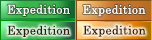
<style>
.page{position:relative;width:152px;height:40px}
.page>*{position:absolute;margin:0}
.t1{font:12px "CenturySchoolbook";letter-spacing:0.025em;color:#ffffff}
.t2{font:12px "CenturySchoolbook";letter-spacing:0.025em;color:#321a02}
</style>
<div class="page">
<p class="t1" style="left:7px;top:4px;width:63px;height:12px">Expedition</p>
<p class="t1" style="left:83px;top:4px;width:63px;height:13px">Expedition</p>
<p class="t2" style="left:7px;top:25px;width:63px;height:12px">Expedition</p>
<p class="t2" style="left:83px;top:25px;width:63px;height:12px">Expedition</p>
</div>
